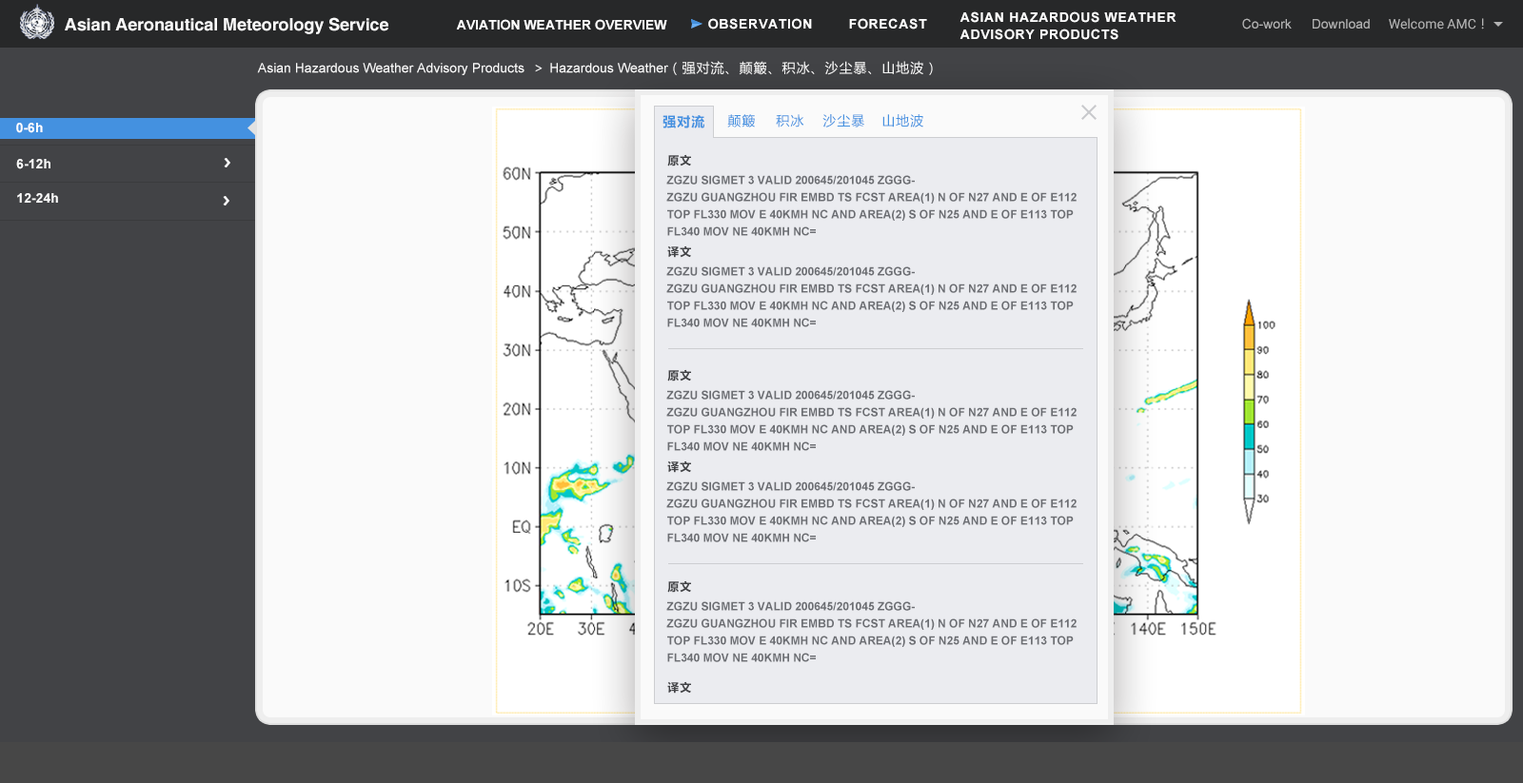
<style>
.page{position:relative;width:1523px;height:783px;background:#fafafa}
.page>*{position:absolute;margin:0}
.t1{font:17.1px "Helvetica-Bold";letter-spacing:-0.005em;color:#fafafa}
.t2{font:13.3px/17.1px "Arial-BoldMT";letter-spacing:0.05em;color:#ffffff}
.t3{font:13.3px "Arial-BoldMT";color:#ffffff}
.t4{font:13.3px "Arial-BoldMT";letter-spacing:0.05em;color:#ffffff}
.t5{font:13.3px "ArialMT";color:#b3b3b3}
.t6{font:13.3px "Roboto-Regular";color:#b3b3b3}
.t7{font:13.3px "MicrosoftYaHei";color:#b3b3b3}
.t8{font:13.3px "ArialMT";color:#ffffff}
.t9{font:13.3px "MicrosoftYaHei";letter-spacing:0.07em;color:#0d2a5b}
.t10{font:13.3px "MicrosoftYaHei-Bold";letter-spacing:0.075em;color:#4491e0}
.t11{font:13.3px "MicrosoftYaHei";letter-spacing:0.075em;color:#4491e0}
.t12{font:13.3px "Arial-BoldMT";color:#fafafa}
.t13{font:11.4px "MicrosoftYaHei-Bold";letter-spacing:0.075em;color:#424346}
.t14{font:11.4px/17.1px "Arial-BoldMT";color:#6c6e73}
</style>
<div class="page">
<p class="t1" style="left:65px;top:17px;width:323px;height:17px">Asian Aeronautical Meteorology Service</p>
<p class="t2" style="left:959px;top:11px;width:217px;height:29px">ASIAN HAZARDOUS WEATHER<br>ADVISORY PRODUCTS</p>
<p class="t3" style="left:456px;top:19px;width:211px;height:11px">AVIATION WEATHER OVERVIEW</p>
<p class="t4" style="left:708px;top:18px;width:104px;height:11px">OBSERVATION</p>
<p class="t4" style="left:849px;top:18px;width:78px;height:11px">FORECAST</p>
<p class="t5" style="left:1242px;top:18px;width:49px;height:11px">Co-work</p>
<p class="t5" style="left:1312px;top:19px;width:57px;height:10px">Download</p>
<p class="t6" style="left:1388px;top:18px;width:96px;height:11px">Welcome AMC<span class="t7">！</span></p>
<p class="t8" style="left:257px;top:61px;width:676px;height:14px">Asian Hazardous Weather Advisory Products <span class="t9"> &gt; </span>Hazardous Weather<span class="t9">（强对流、颠簸、积冰、沙尘暴、山地波）</span></p>
<p class="t3" style="left:16px;top:123px;width:27px;height:10px">0-6h</p>
<p class="t10" style="left:662px;top:115px;width:42px;height:13px">强对流</p>
<p class="t11" style="left:727px;top:114px;width:28px;height:14px">颠簸</p>
<p class="t11" style="left:776px;top:114px;width:28px;height:14px">积冰</p>
<p class="t11" style="left:822px;top:114px;width:42px;height:14px">沙尘暴</p>
<p class="t11" style="left:882px;top:114px;width:41px;height:14px">山地波</p>
<p class="t12" style="left:16px;top:159px;width:34px;height:10px">6-12h</p>
<p class="t13" style="left:667px;top:154px;width:24px;height:13px">原文</p>
<p class="t14" style="left:666px;top:175px;width:410px;height:61px">ZGZU SIGMET 3 VALID 200645/201045 ZGGG-<br>ZGZU GUANGZHOU FIR EMBD TS FCST AREA(1) N OF N27 AND E OF E112<br>TOP FL330 MOV E 40KMH NC AND AREA(2) S OF N25 AND E OF E113 TOP<br>FL340 MOV NE 40KMH NC=</p>
<p class="t12" style="left:17px;top:193px;width:41px;height:10px">12-24h</p>
<p class="t13" style="left:667px;top:246px;width:24px;height:12px">译文</p>
<p class="t14" style="left:666px;top:266px;width:410px;height:61px">ZGZU SIGMET 3 VALID 200645/201045 ZGGG-<br>ZGZU GUANGZHOU FIR EMBD TS FCST AREA(1) N OF N27 AND E OF E112<br>TOP FL330 MOV E 40KMH NC AND AREA(2) S OF N25 AND E OF E113 TOP<br>FL340 MOV NE 40KMH NC=</p>
<p class="t13" style="left:667px;top:369px;width:24px;height:13px">原文</p>
<p class="t14" style="left:666px;top:390px;width:410px;height:61px">ZGZU SIGMET 3 VALID 200645/201045 ZGGG-<br>ZGZU GUANGZHOU FIR EMBD TS FCST AREA(1) N OF N27 AND E OF E112<br>TOP FL330 MOV E 40KMH NC AND AREA(2) S OF N25 AND E OF E113 TOP<br>FL340 MOV NE 40KMH NC=</p>
<p class="t13" style="left:667px;top:461px;width:24px;height:12px">译文</p>
<p class="t14" style="left:666px;top:482px;width:410px;height:60px">ZGZU SIGMET 3 VALID 200645/201045 ZGGG-<br>ZGZU GUANGZHOU FIR EMBD TS FCST AREA(1) N OF N27 AND E OF E112<br>TOP FL330 MOV E 40KMH NC AND AREA(2) S OF N25 AND E OF E113 TOP<br>FL340 MOV NE 40KMH NC=</p>
<p class="t13" style="left:667px;top:580px;width:24px;height:13px">原文</p>
<p class="t14" style="left:666px;top:601px;width:410px;height:61px">ZGZU SIGMET 3 VALID 200645/201045 ZGGG-<br>ZGZU GUANGZHOU FIR EMBD TS FCST AREA(1) N OF N27 AND E OF E112<br>TOP FL330 MOV E 40KMH NC AND AREA(2) S OF N25 AND E OF E113 TOP<br>FL340 MOV NE 40KMH NC=</p>
<p class="t13" style="left:667px;top:681px;width:24px;height:13px">译文</p>
</div>
